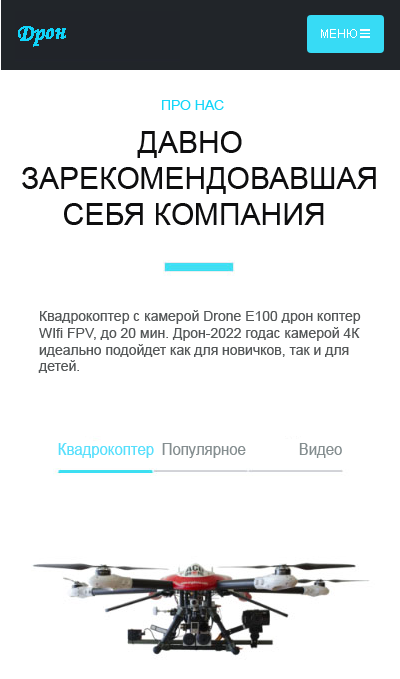
<style>
.page{position:relative;width:400px;height:679px;background:#ffffff}
.page>*{position:absolute;margin:0}
.t1{font:24px "MonotypeCorsiva";color:#10d4fa}
.t2{font:14px "ArialMT";color:#15d6f9}
.t3{font:30px "ArialMT";color:#0e0e0f}
.t4{font:14px "ArialMT";color:#545758}
.t5{font:17.2px "ArialMT";color:#57dffc;scale:0.87 1}
.t6{font:17.2px "ArialMT";color:#858e90;scale:0.87 1}
</style>
<div class="page">
<p class="t1" style="left:18px;top:26px;width:48px;height:21px;rotate:7deg">Дрон</p>
<p class="t2" style="left:162px;top:100px;width:62px;height:10px">ПРО НАС</p>
<p class="t3" style="left:22px;top:131px;width:354px;height:94px">ДАВНО <br>ЗАРЕКОМЕНДОВАВШАЯ <br>     СЕБЯ КОМПАНИЯ</p>
<p class="t4" style="left:38px;top:310px;width:323px;height:63px">Квадрокоптер с камерой Drone E100 дрон коптер <br>WIfi FPV, до 20 мин. Дрон-2022 годас камерой 4К <br>идеально подойдет как для новичков, так и для <br>детей.</p>
<p class="t5" style="left:58px;top:443px;width:96px;height:15px">Квадрокоптер</p>
<p class="t6" style="left:162px;top:443px;width:84px;height:15px">Популярное</p>
<p class="t6" style="left:299px;top:443px;width:43px;height:15px">Видео</p>
</div>
